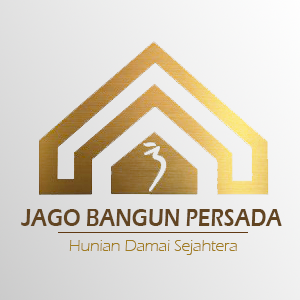
<style>
.page{position:relative;width:300px;height:300px}
.page>*{position:absolute;margin:0}
.t1{font:25px "ErasITC-Demi";color:#614522;scale:0.84 1}
.t2{font:16.7px "ErasITC-Light";color:#a17b1f}
</style>
<div class="page">
<p class="t1" style="left:21px;top:209px;width:261px;height:17px">JAGO BANGUN PERSADA</p>
<p class="t2" style="left:69px;top:240px;width:168px;height:15px">Hunian Damai Sejahtera</p>
</div>
